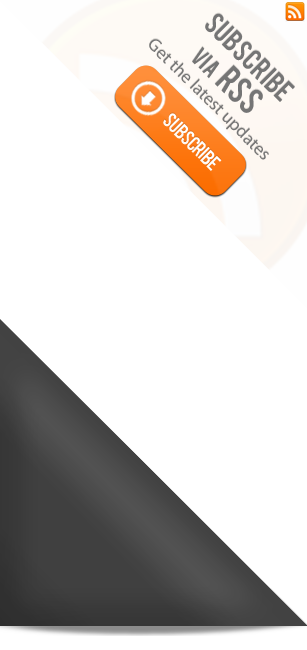
<style>
.page{position:relative;width:307px;height:650px;background:#ffffff}
.page>*{position:absolute;margin:0}
.t1{font:24px "Bebas";color:#757575}
.t2{font:18px "MyriadPro-Regular";color:#757575}
.t3{font:20px "Bebas";color:#757575}
.t4{font:30px "Bebas";color:#757575}
.t5{font:16.7px "Bebas";letter-spacing:-0.05em;color:#ffffff}
</style>
<div class="page">
<p class="t1" style="left:205px;top:13px;width:90px;height:89px;rotate:45deg">SUBSCRIBE</p>
<p class="t2" style="left:149px;top:39px;width:120px;height:121px;rotate:45deg">Get the latest updates</p>
<p class="t3" style="left:192px;top:46px;width:71px;height:67px;rotate:45deg">VIA<span class="t4">  RSS</span></p>
<p class="t5" style="left:163px;top:113px;width:59px;height:58px;rotate:45deg">Subscribe</p>
</div>
